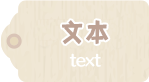
<style>
.page{position:relative;width:149px;height:82px}
.page>*{position:absolute;margin:0}
.t1{font:15.6px "shetumodengxiaofangti";color:#bda193;font-weight:bold;scale:0.94 1}
</style>
<div class="page">
<p class="t1" style="left:62px;top:20px;width:47px;height:24px">文本</p>
</div>
